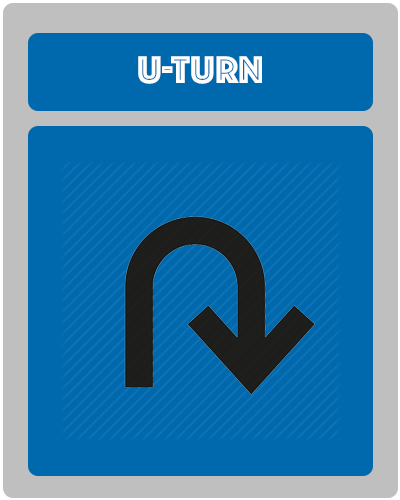
<style>
.page{position:relative;width:400px;height:500px;background:#0069ae}
.page>*{position:absolute;margin:0}
.t1{font:40px "Phosphate-Inline";color:#fefefe}
</style>
<div class="page">
<p class="t1" style="left:138px;top:56px;width:124px;height:28px">U-TURN</p>
</div>
